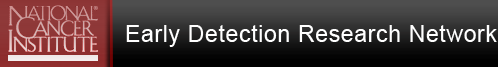
<style>
.page{position:relative;width:498px;height:67px}
.page>*{position:absolute;margin:0}
.t1{font:22.8px "ArialMT";letter-spacing:0.034em;color:#ffffff}
</style>
<div class="page">
<p class="t1" style="left:126px;top:25px;width:371px;height:22px">Early Detection Research Network</p>
</div>
